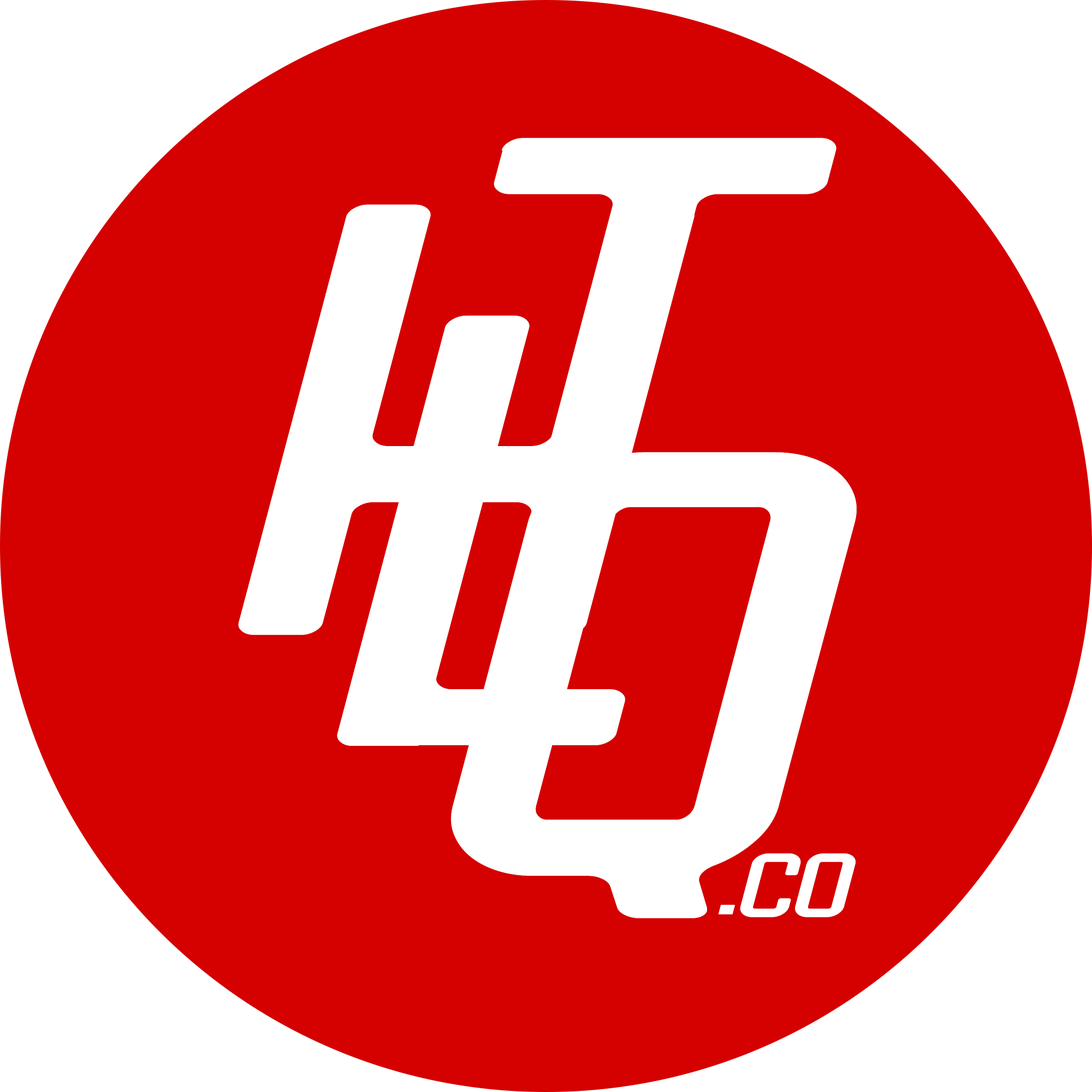
<style>
.page{position:relative;width:1092px;height:1092px;background:#d50000}
.page>*{position:absolute;margin:0}
.t1{font:614.3px "HANDLERRegular";letter-spacing:-0.005em;color:#ffffff;font-style:italic;scale:1.5 1}
.t2{font:91.1px "HANDLERRegular";letter-spacing:-0.005em;color:#ffffff;font-style:italic;scale:1.5 1}
</style>
<div class="page">
<p class="t1" style="left:494px;top:138px;width:342px;height:430px">T</p>
<p class="t1" style="left:238px;top:204px;width:457px;height:431px">H</p>
<p class="t1" style="left:337px;top:316px;width:288px;height:430px">L</p>
<p class="t1" style="left:451px;top:452px;width:406px;height:466px">Q</p>
<p class="t2" style="left:718px;top:853px;width:138px;height:64px">.CO</p>
</div>
